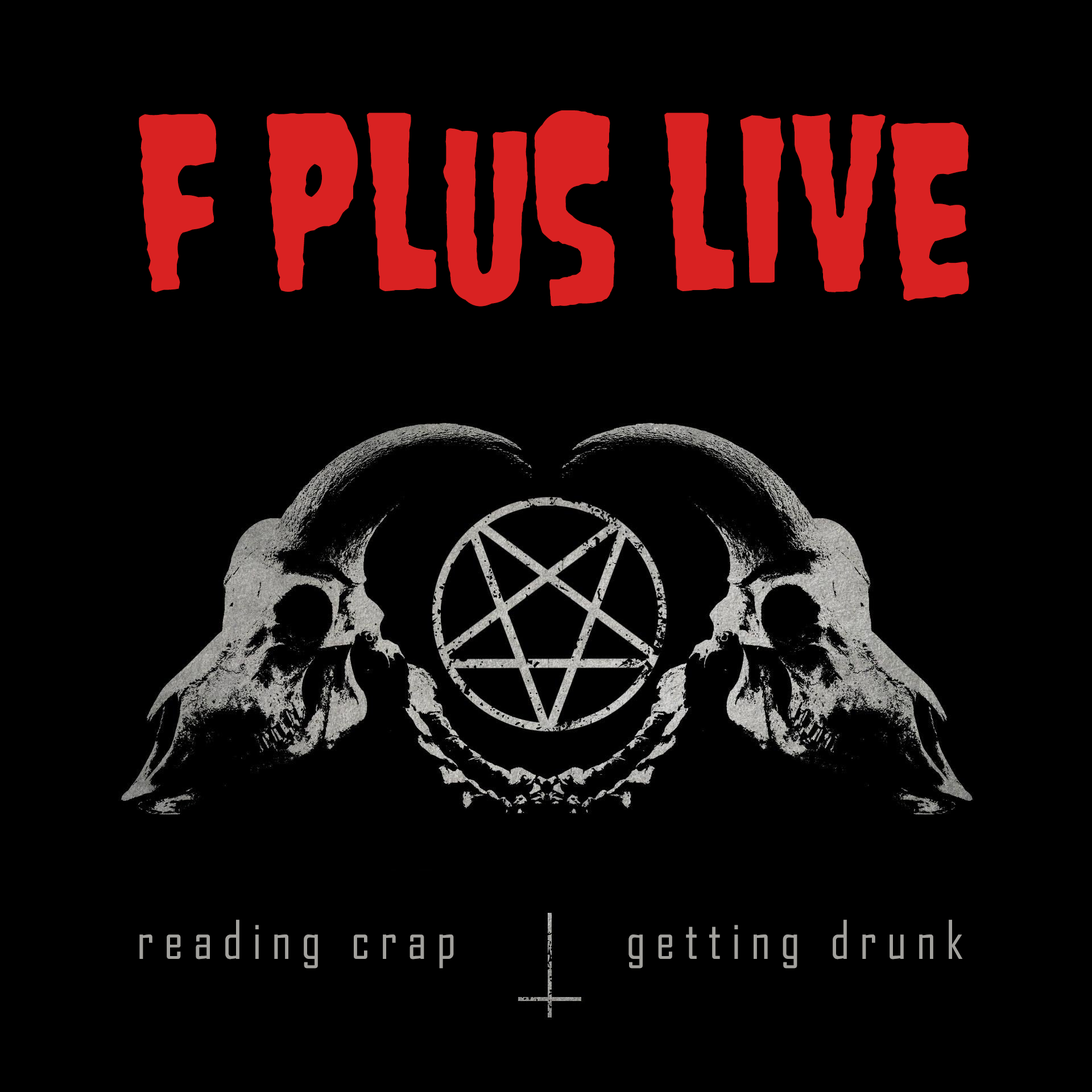
<style>
.page{position:relative;width:1092px;height:1092px;background:#000000}
.page>*{position:absolute;margin:0}
.t1{font:202.5px "Danzig4p";letter-spacing:0.015em;color:#d92222}
.t2{font:51.2px "AgencyFB-Reg";letter-spacing:0.2em;color:#a2a19d}
</style>
<div class="page">
<p class="t1" style="left:139px;top:110px;width:830px;height:197px">f plus live</p>
<p class="t2" style="left:139px;top:920px;width:315px;height:49px">reading crap</p>
<p class="t2" style="left:628px;top:920px;width:335px;height:49px">getting drunk</p>
</div>
